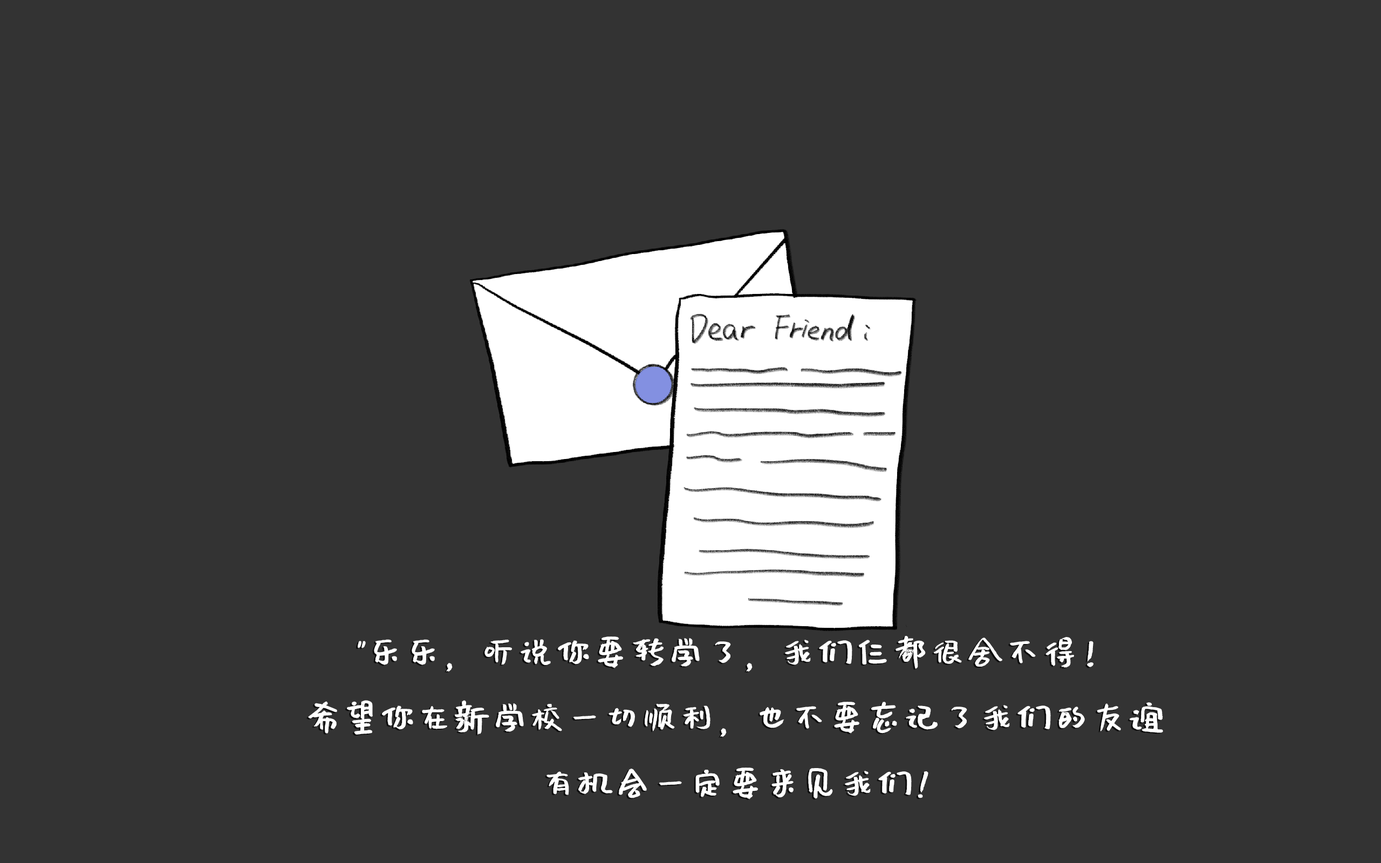
<style>
.page{position:relative;width:1381px;height:863px;background:#333333}
.page>*{position:absolute;margin:0}
.t1{font:37.5px "Muyao-Softbrush";color:#ffffff}
</style>
<div class="page">
<p class="t1" style="left:308px;top:636px;width:855px;height:164px;text-align:center">"乐乐，听说你要转学了，我们仨都很舍不得！<br>希望你在新学校一切顺利，也不要忘记了我们的友谊<br>有机会一定要来见我们!<br><br>有机会<br>！"</p>
</div>
